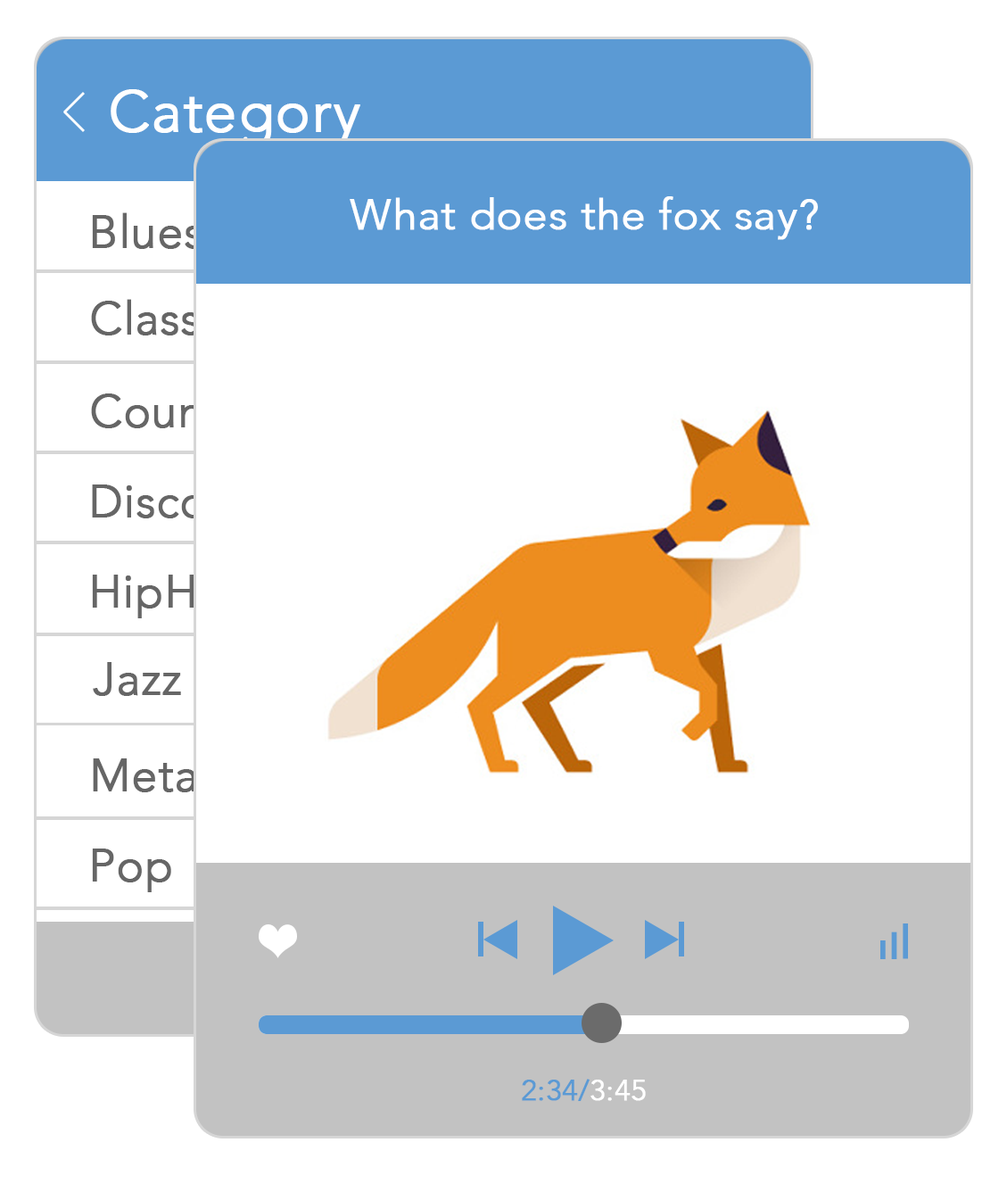
<style>
.page{position:relative;width:1007px;height:1184px;background:#ffffff}
.page>*{position:absolute;margin:0}
.t1{font:58.4px "Avenir-Light";color:#ffffff;font-weight:bold}
.t2{font:43.2px "Avenir-Light";color:#ffffff;font-weight:bold}
.t3{font:45.7px "Avenir-Light";color:#666666;font-weight:bold}
.t4{font:45.7px "Avenir-Light";font-weight:bold}
.t5{font:29.5px "Avenir-Light";color:#5b9ad4;font-weight:bold}
.t6{font:29.5px "Avenir-Light";color:#ffffff;font-weight:bold}
</style>
<div class="page">
<p class="t1" style="left:111px;top:89px;width:249px;height:57px">Category</p>
<p class="t2" style="left:350px;top:196px;width:468px;height:44px">What does the fox say?</p>
<p class="t3" style="left:92px;top:212px;width:111px;height:37px">Blues</p>
<p class="t4" style="left:91px;top:299px;width:178px;height:36px">Classical</p>
<p class="t4" style="left:91px;top:393px;width:169px;height:45px">Country</p>
<p class="t3" style="left:92px;top:482px;width:124px;height:36px">Discol</p>
<p class="t3" style="left:92px;top:575px;width:161px;height:43px">HipHop</p>
<p class="t3" style="left:93px;top:662px;width:88px;height:34px">Jazz</p>
<p class="t3" style="left:93px;top:756px;width:114px;height:36px">Metal</p>
<p class="t3" style="left:92px;top:848px;width:79px;height:44px">Pop</p>
<p class="t5" style="left:522px;top:1079px;width:124px;height:22px">2:34/<span class="t6">3:45</span></p>
</div>
